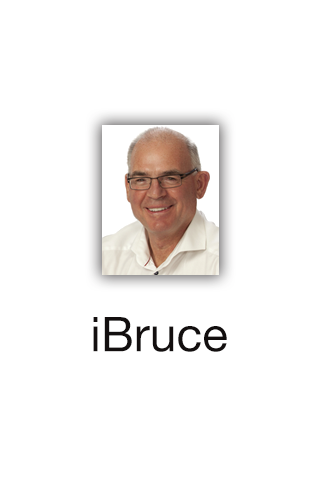
<style>
.page{position:relative;width:320px;height:480px;background:#ffffff}
.page>*{position:absolute;margin:0}
.t1{font:48px "HelveticaNeue";color:#130f0f}
</style>
<div class="page">
<p class="t1" style="left:93px;top:317px;width:134px;height:35px">iBruce</p>
</div>
